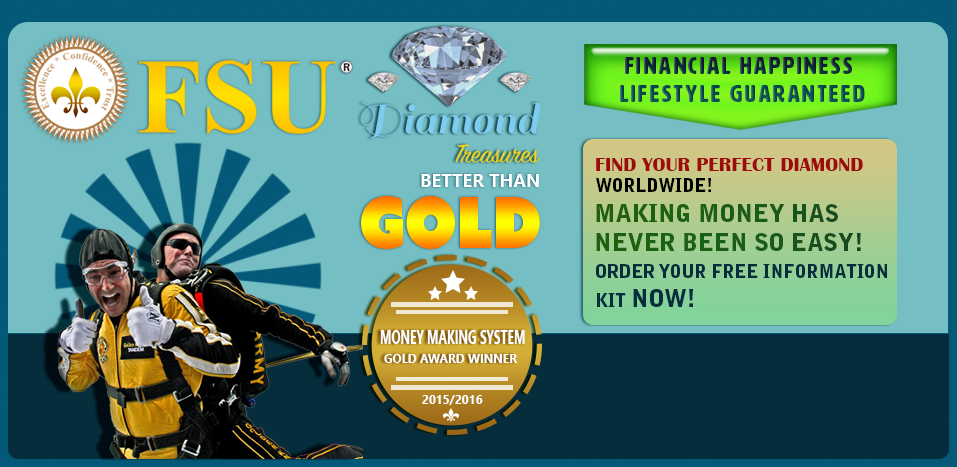
<style>
.page{position:relative;width:957px;height:467px;background:#75bec4}
.page>*{position:absolute;margin:0}
.t1{font:24px/28px "HWTArtz";letter-spacing:0.1em}
.t2{font:20px "BritannicBold";color:#9e0b0f}
.t3{font:18px "NirmalaUI-Bold";color:#fefefe}
.t4{font:18px "BellGothicStd-Black";color:#000000}
.t5{font:70.3px "AzoSansUber-Regular";scale:0.85 1}
.t6{font:24px "BellGothicStd-Black";color:#195f16}
.t7{font:18px "BellGothicStd-Black";color:#062d3c}
.t8{font:24px "BellGothicStd-Black";color:#062d3c}
.t9{font:20.4px "NirmalaUI-Bold";color:#fefefe;scale:0.59 1}
.t10{font:12px "NirmalaUI-Bold";color:#fefefe}
</style>
<div class="page">
<p class="t1" style="left:620px;top:57px;width:245px;height:45px;text-align:center">FINANCIAL HAPPINESS <br>LIFESTYLE GUARANTEED</p>
<p class="t2" style="left:596px;top:158px;width:267px;height:13px">FIND YOUR PERFECT DIAMOND</p>
<p class="t3" style="left:421px;top:174px;width:118px;height:13px">BETTER THAN</p>
<p class="t4" style="left:596px;top:178px;width:115px;height:14px">WORLDWIDE!</p>
<p class="t5" style="left:361px;top:196px;width:179px;height:53px">GOLD</p>
<p class="t6" style="left:596px;top:204px;width:265px;height:47px">MAKING MONEY HAS <br>NEVER BEEN SO EASY!</p>
<p class="t7" style="left:596px;top:264px;width:291px;height:43px">ORDER YOUR FREE INFORMATION <br>KIT <span class="t8">NOW!</span></p>
<p class="t9" style="left:380px;top:330px;width:145px;height:14px">MONEY MAKING SYSTEM</p>
<p class="t10" style="left:384px;top:354px;width:134px;height:9px">GOLD AWARD WINNER</p>
<p class="t10" style="left:422px;top:395px;width:61px;height:10px">2015/2016</p>
</div>
